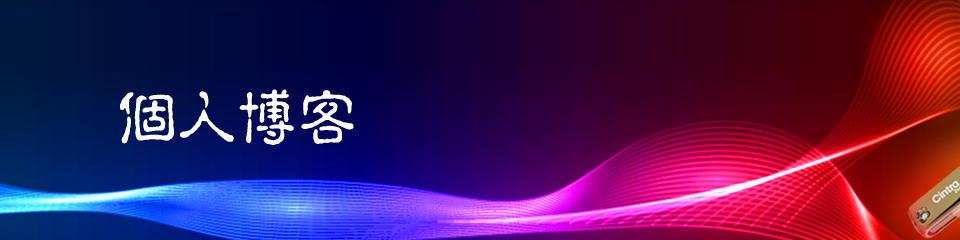
<style>
.page{position:relative;width:960px;height:240px}
.page>*{position:absolute;margin:0}
.t1{font:60px "¾­µä·±¹ÅÓ¡ Regular";color:#fffafb}
</style>
<div class="page">
<p class="t1" style="left:120px;top:89px;width:234px;height:56px">个人博客</p>
</div>
